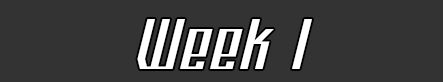
<style>
.page{position:relative;width:443px;height:82px;background:#333333}
.page>*{position:absolute;margin:0}
.t1{font:80px "PlatformEight";color:#ffffff}
</style>
<div class="page">
<p class="t1" style="left:137px;top:19px;width:175px;height:50px">Week 1</p>
</div>
